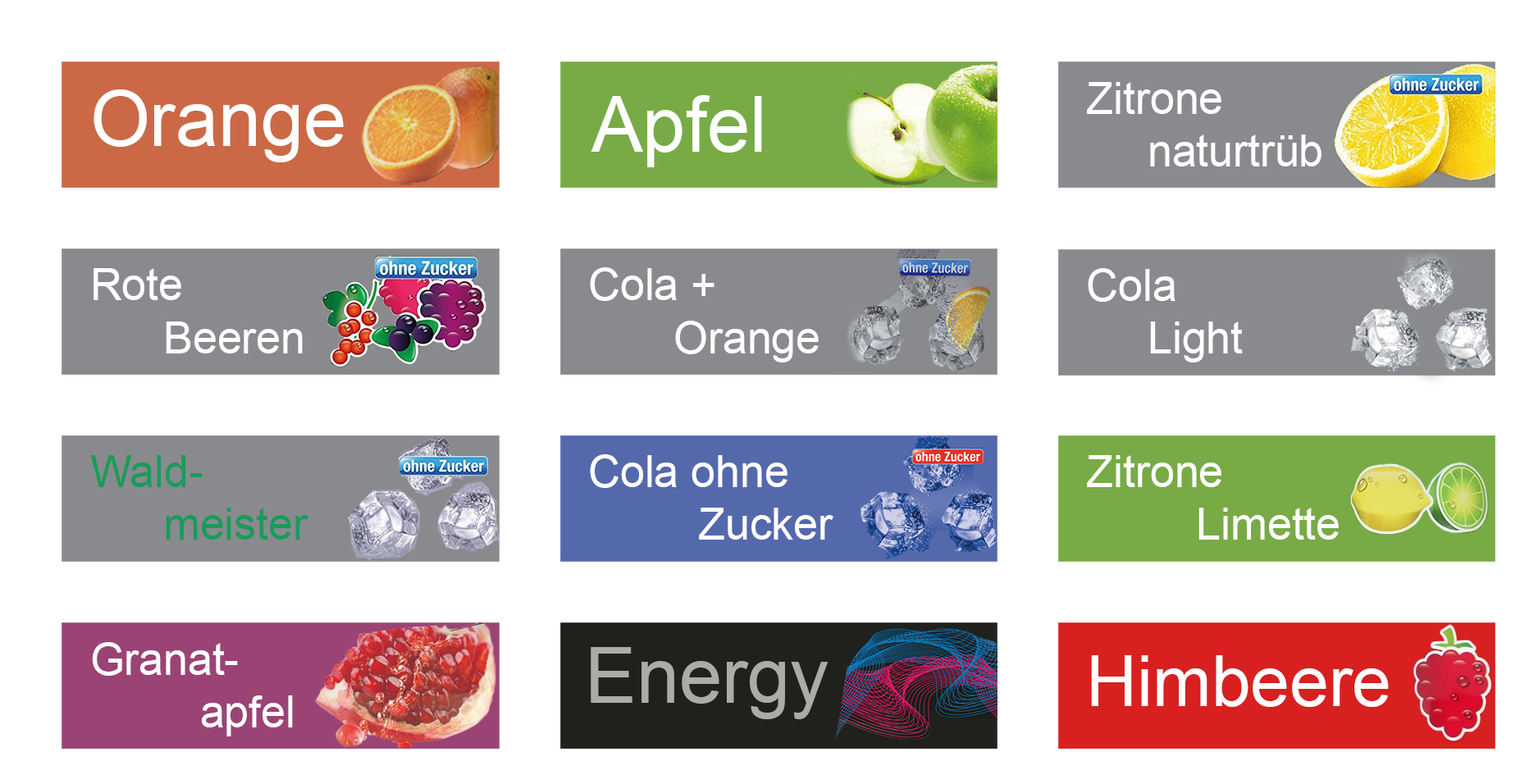
<style>
.page{position:relative;width:1520px;height:784px;background:#ffffff}
.page>*{position:absolute;margin:0}
.t1{font:76.9px "ArialMT";color:#ffffff}
.t2{font:44px "ArialMT";color:#ffffff}
.t3{font:44px "ArialMT";color:#1a9b5b}
.t4{font:76.9px "ArialMT";color:#ababa9}
.t5{font:70.3px "ArialMT";color:#ffffff}
</style>
<div class="page">
<p class="t1" style="left:94px;top:89px;width:250px;height:73px">Orange</p>
<p class="t2" style="left:1087px;top:82px;width:235px;height:85px">Zitrone<br>     naturtrüb</p>
<p class="t1" style="left:591px;top:95px;width:171px;height:72px">Apfel</p>
<p class="t2" style="left:94px;top:268px;width:209px;height:86px">Rote<br>      Beeren</p>
<p class="t2" style="left:590px;top:267px;width:229px;height:96px">Cola +<br>       Orange</p>
<p class="t2" style="left:1088px;top:268px;width:155px;height:95px">Cola<br>     Light</p>
<p class="t3" style="left:90px;top:455px;width:218px;height:85px">Wald-<br>      meister</p>
<p class="t2" style="left:590px;top:455px;width:244px;height:85px">Cola ohne<br>         Zucker</p>
<p class="t2" style="left:1087px;top:455px;width:252px;height:85px">Zitrone<br>         Limette</p>
<p class="t2" style="left:92px;top:642px;width:201px;height:95px">Granat-<br>         apfel</p>
<p class="t4" style="left:591px;top:647px;width:238px;height:73px">Energy</p>
<p class="t5" style="left:1091px;top:656px;width:298px;height:51px">Himbeere</p>
</div>
